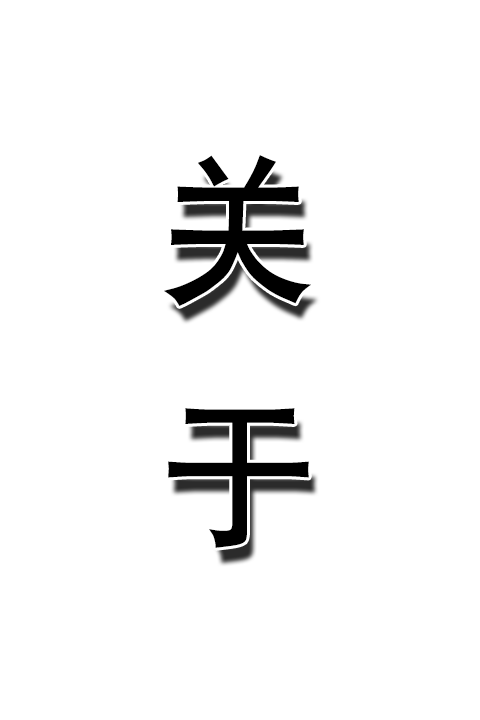
<style>
.page{position:relative;width:480px;height:720px;background:#ffffff}
.page>*{position:absolute;margin:0}
.t1{font:156.7px "ç»å¸é»ä½ç®-regular";color:#000000;scale:1.03 1}
</style>
<div class="page">
<p class="t1" style="left:164px;top:155px;width:147px;height:393px">关 于</p>
</div>
